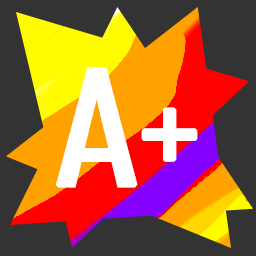
<style>
.page{position:relative;width:256px;height:256px;background:#333333}
.page>*{position:absolute;margin:0}
.t1{font:150px "AgencyFB-Reg";letter-spacing:-0.04em;color:#ffffff;font-weight:bold;scale:1.5 1}
.t2{font:150px "AgencyFB-Reg";letter-spacing:-0.04em;color:#ffffff;font-weight:bold}
</style>
<div class="page">
<p class="t1" style="left:56px;top:67px;width:142px;height:121px">A<span class="t2">+</span></p>
</div>
